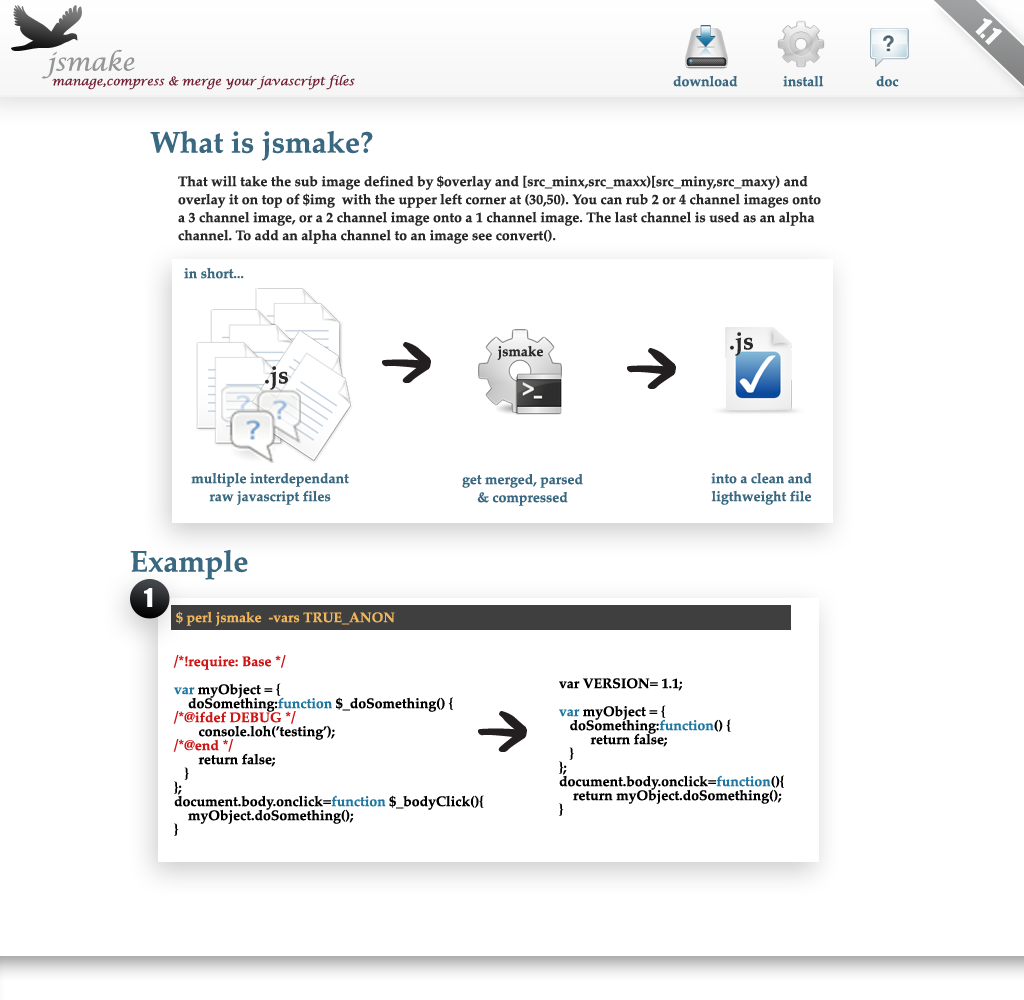
<style>
.page{position:relative;width:1024px;height:1000px;background:#ffffff}
.page>*{position:absolute;margin:0}
.t1{font:24px "Impact";color:#ffffff}
.t2{font:24px "LucidaCalligraphy-Italic";color:#969696}
.t3{font:12px "LucidaCalligraphy-Italic";color:#732034}
.t4{font:14px "Palatino-Bold";color:#396880}
.t5{font:30px "Palatino-Bold";color:#396880}
.t6{font:14px/18px "Palatino-Bold";color:#272727}
.t7{font:24px "Palatino-Bold";color:#292929}
.t8{font:14px "Palatino-Bold";color:#292929}
.t9{font:14px/18px "Palatino-Bold";color:#396880}
.t10{font:14px "Palatino-Bold";color:#f0b65b}
.t11{font:14px/14px "Palatino-Bold";color:#000000}
.t12{font:14px/14px "Palatino-Bold";color:#d01515}
.t13{font:14px/14px "Palatino-Bold";color:#2078a1}
</style>
<div class="page">
<p class="t1" style="left:975px;top:18px;width:28px;height:27px;rotate:45deg">1.1</p>
<p class="t2" style="left:41px;top:49px;width:94px;height:30px">jsmake</p>
<p class="t3" style="left:52px;top:74px;width:303px;height:16px">manage,compress &amp; merge your javascript files</p>
<p class="t4" style="left:673px;top:75px;width:226px;height:12px">download             install               doc</p>
<p class="t5" style="left:150px;top:130px;width:223px;height:31px">What is jsmake?</p>
<p class="t6" style="left:178px;top:175px;width:643px;height:69px">That will take the sub image defined by $overlay and [src_minx,src_maxx)[src_miny,src_maxy) and overlay it on top of $img  with the upper left corner at (30,50). You can rub 2 or 4 channel images onto a 3 channel image, or a 2 channel image onto a 1 channel image. The last channel is used as an alpha channel. To add an alpha channel to an image see convert().</p>
<p class="t4" style="left:184px;top:267px;width:60px;height:12px">in short...</p>
<p class="t7" style="left:730px;top:332px;width:23px;height:24px">.js</p>
<p class="t8" style="left:497px;top:345px;width:46px;height:15px">jsmake</p>
<p class="t7" style="left:265px;top:366px;width:23px;height:24px">.js</p>
<p class="t9" style="left:191px;top:472px;width:158px;height:33px;text-align:center">multiple interdependant <br>raw javascript files</p>
<p class="t9" style="left:462px;top:473px;width:121px;height:33px;text-align:center">get merged, parsed <br>&amp; compressed</p>
<p class="t9" style="left:711px;top:472px;width:101px;height:33px;text-align:center">into a clean and <br>ligthweight file</p>
<p class="t5" style="left:130px;top:549px;width:118px;height:31px">Example</p>
<p class="t1" style="left:144px;top:588px;width:9px;height:19px">1</p>
<p class="t10" style="left:176px;top:611px;width:219px;height:15px">$ perl jsmake  -vars TRUE_ANON</p>
<p class="t11" style="left:173px;top:655px;width:311px;height:181px"><span class="t12">/*!require: Base */<br></span><span class="t13"><br>var</span> myObject = {<br>    doSomething:<span class="t13">function </span>$_doSomething() {<br><span class="t12">/*@ifdef DEBUG */<br></span>       console.loh(’testing’);<br><span class="t12">/*@end */<br></span>       return false;<br>   }<br>};<br>document.body.onclick=<span class="t13">function</span> $_bodyClick(){<br>    myObject.doSomething();<br>}</p>
<p class="t11" style="left:559px;top:678px;width:225px;height:138px">var VERSION= 1.1;<br><span class="t13"><br>var</span> myObject = {<br>   doSomething:<span class="t13">function</span>() {<br>         return false;<br>   }<br>};<br>document.body.onclick=<span class="t13">function</span>(){<br>    return myObject.doSomething();<br>}</p>
</div>
